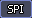
<style>
.page{position:relative;width:32px;height:18px;background:#45495c}
.page>*{position:absolute;margin:0}
.t1{font:10.7px "Tahoma";color:#ffffff}
</style>
<div class="page">
<p class="t1" style="left:8px;top:5px;width:15px;height:8px">SPI</p>
</div>
